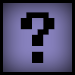
<style>
.page{position:relative;width:75px;height:75px;background:#000000}
.page>*{position:absolute;margin:0}
.t1{font:72px "Fixedsys";color:#000000}
</style>
<div class="page">
<p class="t1" style="left:20px;top:12px;width:35px;height:51px">?</p>
</div>
